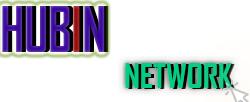
<style>
.page{position:relative;width:250px;height:102px;background:#ffffff}
.page>*{position:absolute;margin:0}
.t1{font:60.1px "AgencyFB-Bold";color:#360497;scale:0.84 1}
.t2{font:60.1px "AgencyFB-Bold";color:#970404;scale:0.84 1}
.t3{font:60.1px "AgencyFB-Bold";scale:0.84 1}
.t4{font:33px "AgencyFB-Bold";color:#00ce83}
.t5{font:33px "AgencyFB-Bold"}
</style>
<div class="page">
<p class="t1" style="left:2px;top:6px;width:103px;height:46px">HUB<span class="t2">I</span>N</p>
<p class="t3" style="left:6px;top:6px;width:103px;height:46px">HUBIN</p>
<p class="t4" style="left:125px;top:63px;width:108px;height:25px">NETWORK</p>
<p class="t5" style="left:128px;top:64px;width:108px;height:25px">NETWORK</p>
</div>
